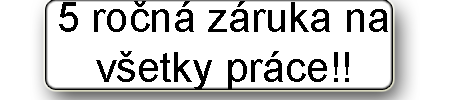
<style>
.page{position:relative;width:450px;height:100px;background:#ffffff}
.page>*{position:absolute;margin:0}
.t1{font:41.7px "ArialMT";color:#000000}
</style>
<div class="page">
<p class="t1" style="left:59px;top:1px;width:329px;height:89px;text-align:center">5 ročná záruka na všetky práce!!</p>
</div>
